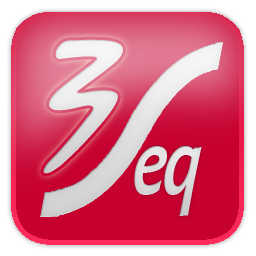
<style>
.page{position:relative;width:256px;height:256px}
.page>*{position:absolute;margin:0}
.t1{font:170px "AfterDisaster";color:#ffffff;font-style:italic;scale:1.15 1}
.t2{font:100px "Candara-BoldItalic";letter-spacing:-0.05em;color:#dcdbdb;font-style:italic;scale:0.7 1}
</style>
<div class="page">
<p class="t1" style="left:43px;top:39px;width:80px;height:135px;rotate:-5deg">3</p>
<p class="t2" style="left:134px;top:146px;width:68px;height:70px">eq</p>
</div>
